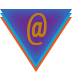
<style>
.page{position:relative;width:72px;height:72px;background:#ffffff}
.page>*{position:absolute;margin:0}
.t1{font:36px "Consolas";color:#c38000}
</style>
<div class="page">
<p class="t1" style="left:27px;top:13px;width:20px;height:32px">@</p>
</div>
